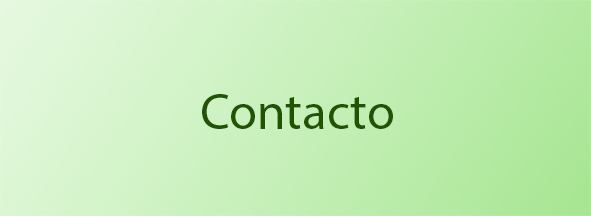
<style>
.page{position:relative;width:591px;height:216px}
.page>*{position:absolute;margin:0}
.t1{font:51.1px "MyriadPro-Regular";color:#205403}
</style>
<div class="page">
<p class="t1" style="left:202px;top:94px;width:191px;height:35px">Contacto</p>
</div>
